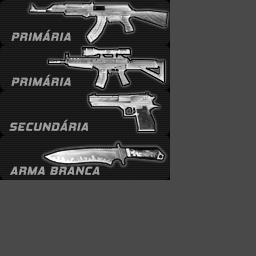
<style>
.page{position:relative;width:256px;height:256px;background:#494949}
.page>*{position:absolute;margin:0}
.t1{font:11.5px "HemiHeadRg-BoldItalic";letter-spacing:0.08em;color:#9d9d9d;text-transform:uppercase}
</style>
<div class="page">
<p class="t1" style="left:11px;top:29px;width:60px;height:12px">pRIMÁRIA</p>
<p class="t1" style="left:11px;top:74px;width:60px;height:12px">pRIMÁRIA</p>
<p class="t1" style="left:9px;top:119px;width:79px;height:12px">SECUNDÁRIA</p>
<p class="t1" style="left:10px;top:166px;width:90px;height:9px">ARMA BRANCA</p>
</div>
